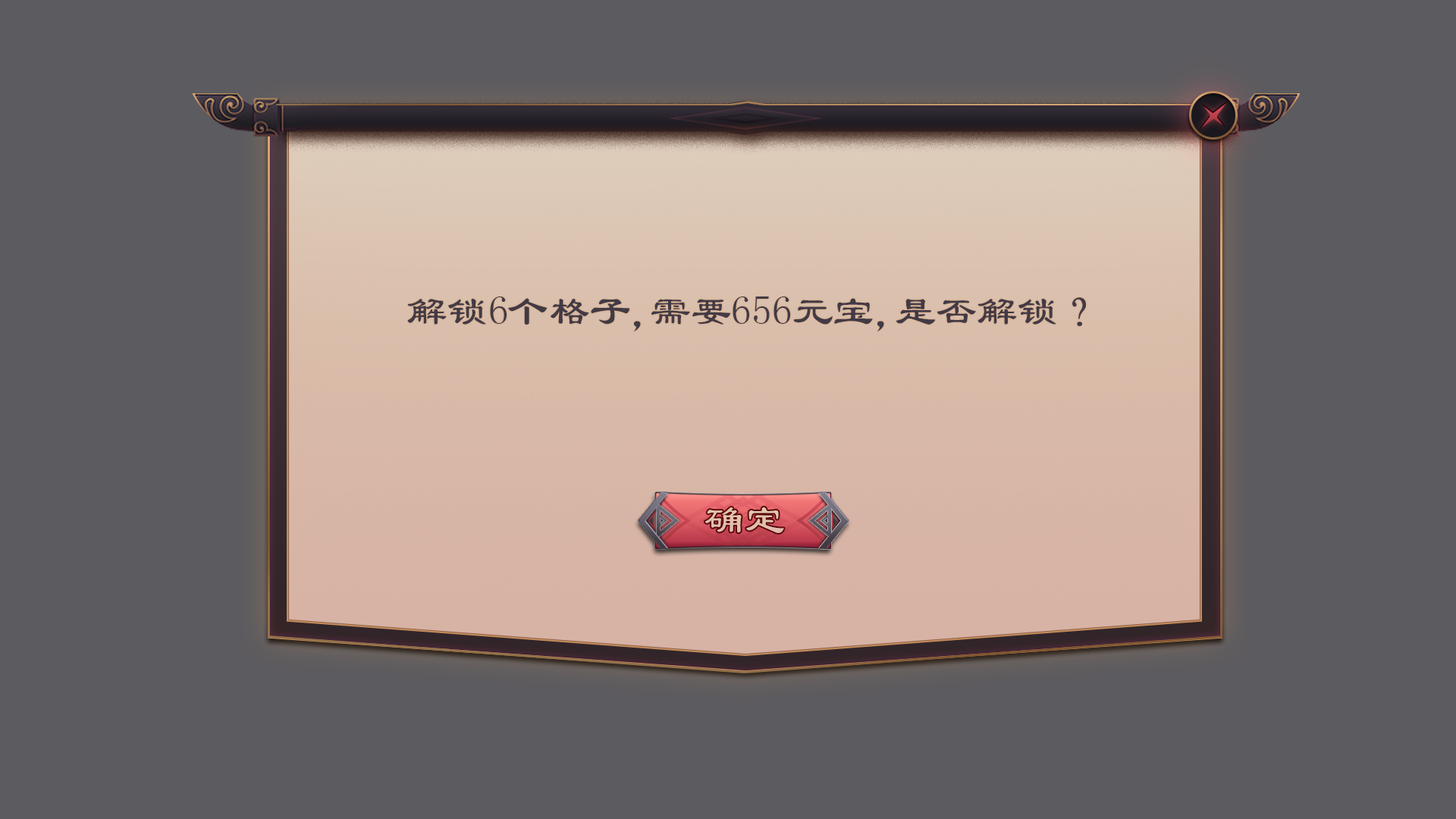
<style>
.page{position:relative;width:1456px;height:819px;background:#5c5b5f}
.page>*{position:absolute;margin:0}
.t1{font:40.7px "LiSu";color:#423a45}
.t2{font:40.3px "LiSu";color:#e2c2ad}
</style>
<div class="page">
<p class="t1" style="left:407px;top:297px;width:679px;height:35px">解锁6个格子，需要656元宝，是否解锁？</p>
<p class="t2" style="left:704px;top:507px;width:80px;height:26px">确定</p>
</div>
